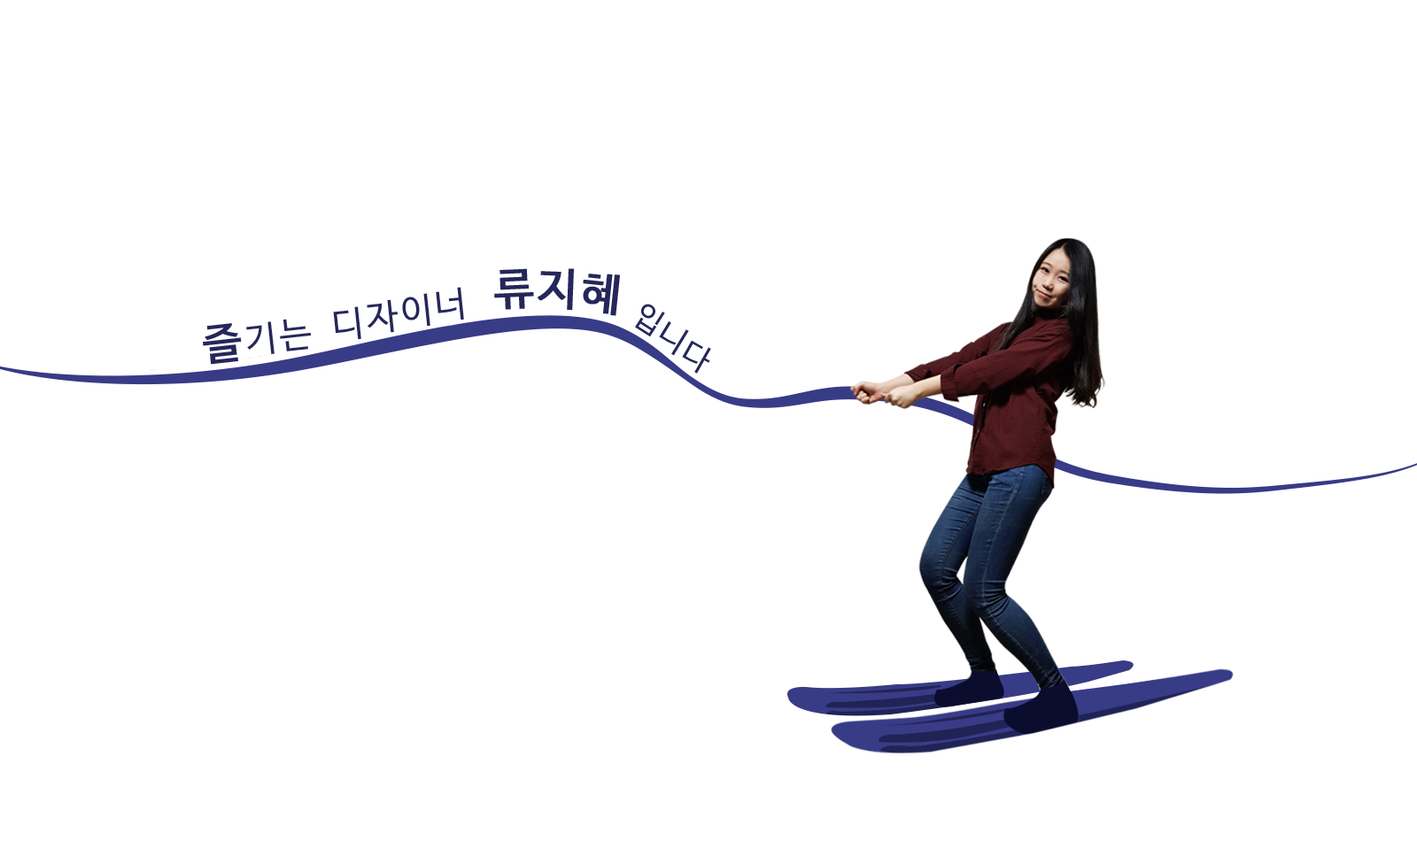
<style>
.page{position:relative;width:1417px;height:841px;background:#ffffff}
.page>*{position:absolute;margin:0}
.t1{font:44.3px "D2Coding";letter-spacing:-0.025em;color:#25275a;font-weight:bold}
.t2{font:35.4px "D2Coding";letter-spacing:-0.025em;color:#25275a}
.t3{font:31px "D2Coding";letter-spacing:-0.025em;color:#25275a}
.t4{font:42.5px "D2Coding";letter-spacing:-0.025em;color:#25275a;font-weight:bold}
</style>
<div class="page">
<p class="t1" style="left:494px;top:268px;width:40px;height:42px;rotate:-2deg">류</p>
<p class="t1" style="left:538px;top:268px;width:36px;height:43px;rotate:2deg">지</p>
<p class="t1" style="left:583px;top:274px;width:37px;height:42px;rotate:6deg">혜</p>
<p class="t2" style="left:402px;top:293px;width:28px;height:34px;rotate:-6deg">이</p>
<p class="t2" style="left:436px;top:287px;width:28px;height:34px;rotate:-6deg">너</p>
<p class="t2" style="left:367px;top:299px;width:31px;height:34px;rotate:-6deg">자</p>
<p class="t3" style="left:635px;top:304px;width:30px;height:33px;rotate:33deg">입</p>
<p class="t2" style="left:333px;top:306px;width:28px;height:34px;rotate:-6deg">디</p>
<p class="t4" style="left:203px;top:323px;width:39px;height:42px;rotate:-6deg">즐</p>
<p class="t2" style="left:246px;top:322px;width:29px;height:32px;rotate:-6deg">기</p>
<p class="t2" style="left:280px;top:319px;width:31px;height:33px;rotate:-6deg">는</p>
<p class="t3" style="left:659px;top:322px;width:30px;height:34px;rotate:31deg">니</p>
<p class="t3" style="left:682px;top:340px;width:29px;height:34px;rotate:30deg">다</p>
</div>
